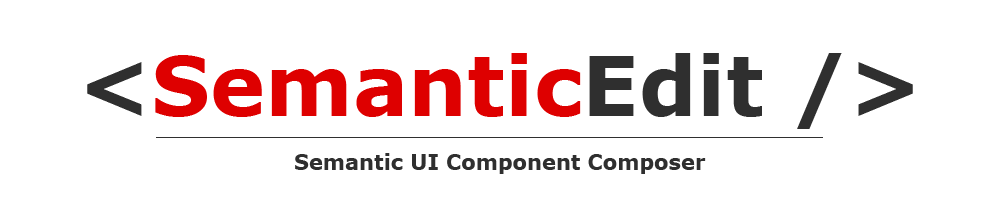
<style>
.page{position:relative;width:1000px;height:208px;background:#ffffff}
.page>*{position:absolute;margin:0}
.t1{font:83px "Verdana-Bold";color:#de0000}
.t2{font:83px "Verdana-Bold";color:#2f2f2f}
.t3{font:21px "Verdana-Bold";color:#2f2f2f}
</style>
<div class="page">
<p class="t1" style="left:87px;top:53px;width:826px;height:76px"><span class="t2">&lt;</span>Semantic<span class="t2">Edit /&gt;</span></p>
<p class="t3" style="left:295px;top:153px;width:411px;height:21px">Semantic UI Component Composer</p>
</div>
